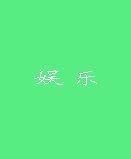
<style>
.page{position:relative;width:131px;height:159px;background:#57ed82}
.page>*{position:absolute;margin:0}
.t1{font:19.2px "AdobeKaitiStd-Regular";letter-spacing:0.2em;color:#f6f8f9;text-transform:uppercase;scale:1.62 1}
</style>
<div class="page">
<p class="t1" style="left:34px;top:70px;width:63px;height:16px">娱乐</p>
</div>
